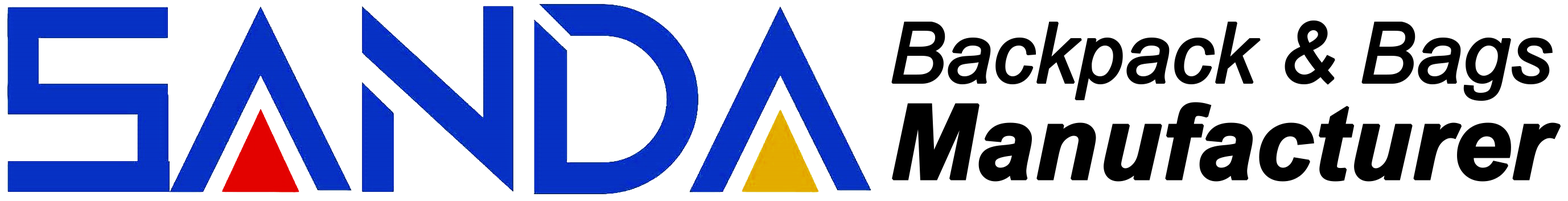
<style>
.page{position:relative;width:1568px;height:201px;background:#ffffff}
.page>*{position:absolute;margin:0}
.t1{font:83.5px/96.4px "Arial-ItalicMT";letter-spacing:-0.02em;color:#000000;font-weight:bold}
.t2{font:103.2px/96.4px "Arial-BoldItalicMT";letter-spacing:-0.02em;color:#000000;font-weight:bold}
</style>
<div class="page">
<p class="t1" style="left:891px;top:20px;width:670px;height:162px">Backpack &amp; Bags<br><span class="t2">Manufacturer</span></p>
</div>
